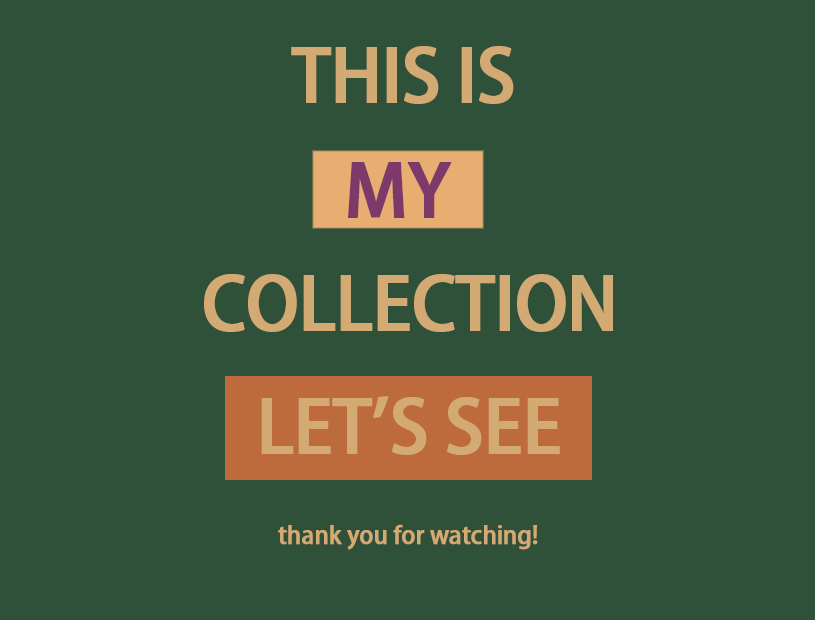
<style>
.page{position:relative;width:815px;height:620px;background:#2f5039}
.page>*{position:absolute;margin:0}
.t1{font:72px "KozGoPr6N-Medium";letter-spacing:-0.025em;color:#d3aa74;font-weight:bold}
.t2{font:72px "KozGoPr6N-Medium";letter-spacing:-0.025em;color:#7d396a;font-weight:bold}
.t3{font:24px "KozGoPr6N-Medium";letter-spacing:-0.025em;color:#d3aa74;font-weight:bold}
</style>
<div class="page">
<p class="t1" style="left:291px;top:46px;width:223px;height:58px">THIS IS</p>
<p class="t2" style="left:348px;top:162px;width:104px;height:56px">MY</p>
<p class="t1" style="left:204px;top:274px;width:409px;height:58px">COLLECTION</p>
<p class="t1" style="left:261px;top:396px;width:299px;height:59px">LET’S SEE</p>
<p class="t3" style="left:278px;top:524px;width:260px;height:26px">thank you for watching!</p>
</div>
